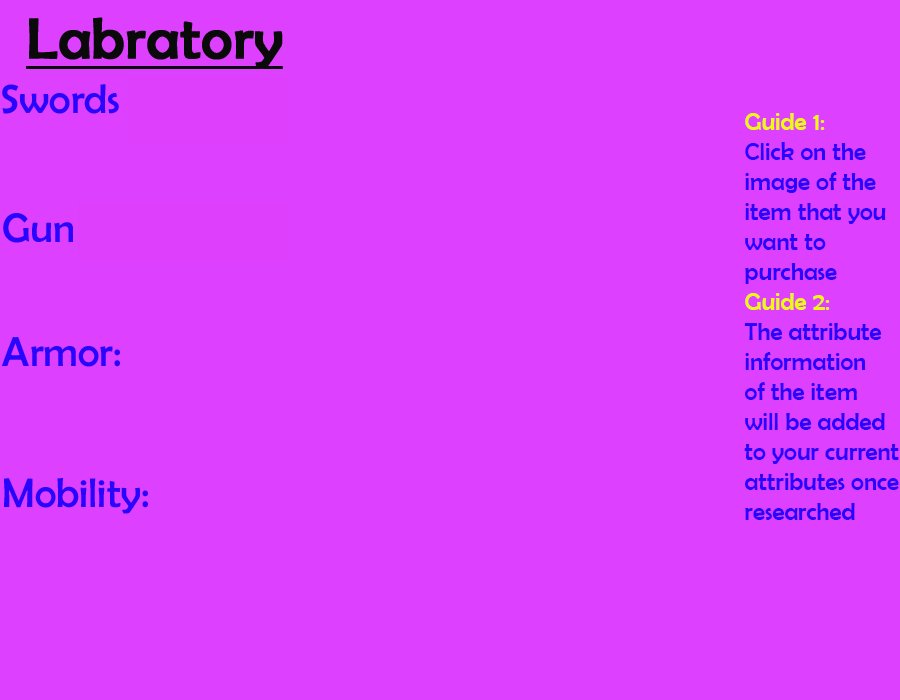
<style>
.page{position:relative;width:900px;height:700px;background:#dd40fe}
.page>*{position:absolute;margin:0}
.t1{font:25px "BerlinSansFB-Reg";color:#2906fb}
.t2{font:25px "BerlinSansFB-Reg";color:#edfb06}
</style>
<div class="page">
<p class="t1" style="left:744px;top:113px;width:155px;height:407px"><span class="t2">Guide 1:<br></span>Click on the <br>image of the <br>item that you<br>want to <br>purchase<br><span class="t2">Guide 2:<br></span>The attribute<br>information<br>of the item <br>will be added<br>to your current<br>attributes once<br>researched</p>
</div>
